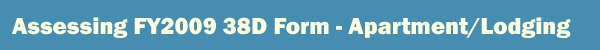
<style>
.page{position:relative;width:600px;height:50px;background:#458db1}
.page>*{position:absolute;margin:0}
.t1{font:24px "FranklinGothic-Heavy";color:#fffedf}
</style>
<div class="page">
<p class="t1" style="left:12px;top:17px;width:559px;height:21px">Assessing FY2009 38D Form - Apartment/Lodging</p>
</div>
